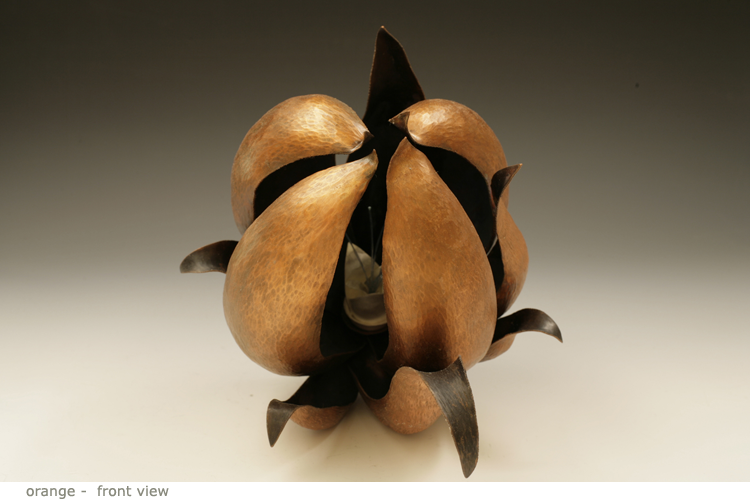
<style>
.page{position:relative;width:750px;height:500px}
.page>*{position:absolute;margin:0}
.t1{font:14px "Verdana";letter-spacing:0.01em;color:#898a7d}
</style>
<div class="page">
<p class="t1" style="left:26px;top:485px;width:143px;height:14px">orange -  front view</p>
</div>
